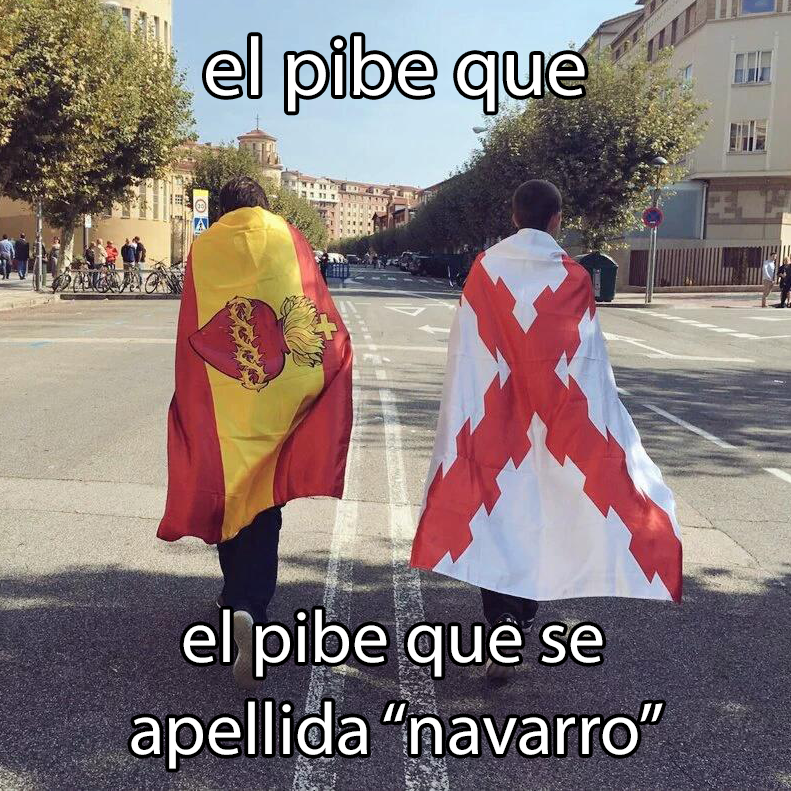
<style>
.page{position:relative;width:791px;height:791px}
.page>*{position:absolute;margin:0}
.t1{font:82.6px "MyriadPro-Regular";color:#ffffff}
.t2{font:73.7px "MyriadPro-Regular";color:#ffffff}
</style>
<div class="page">
<p class="t1" style="left:206px;top:36px;width:379px;height:76px">el pibe que</p>
<p class="t2" style="left:131px;top:609px;width:532px;height:160px;text-align:center">el pibe que se<br>apellida “navarro”</p>
</div>
